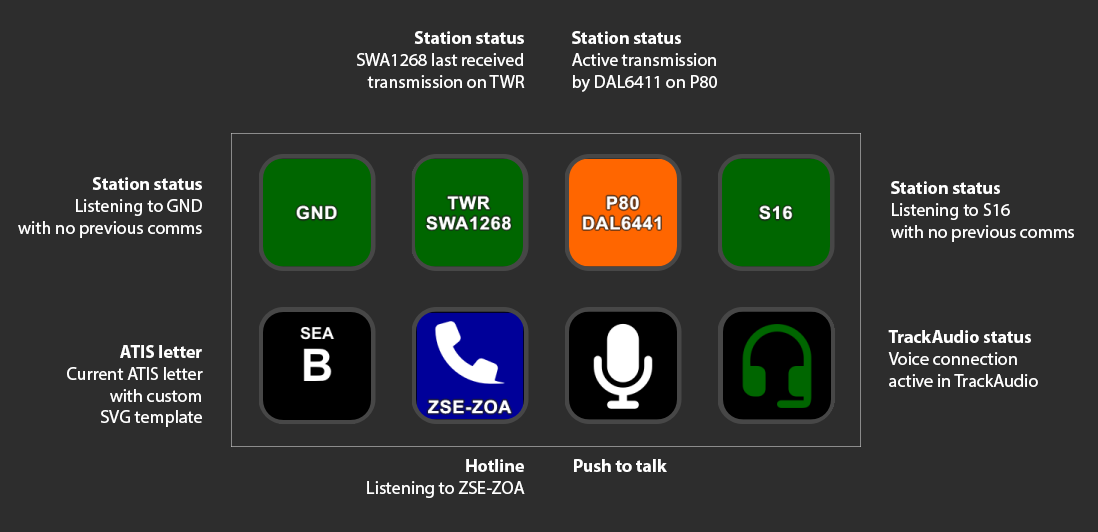
<style>
.page{position:relative;width:1098px;height:532px;background:#2d2d2d}
.page>*{position:absolute;margin:0}
.t1{font:18px "MyriadPro-Regular";color:#ffffff}
.t2{font:18px "MyriadPro-Bold";color:#ffffff}
</style>
<div class="page">
<p class="t1" style="left:357px;top:31px;width:168px;height:57px;text-align:right"><span class="t2">Station status<br></span>SWA1268 last received<br>transmission on TWR</p>
<p class="t1" style="left:572px;top:31px;width:145px;height:61px"><span class="t2">Station status<br></span>Active transmission<br>by DAL6411 on P80</p>
<p class="t1" style="left:18px;top:177px;width:184px;height:61px;text-align:right"><span class="t2">Station status<br></span>Listening to GND<br>with no previous comms</p>
<p class="t1" style="left:891px;top:181px;width:183px;height:61px"><span class="t2">Station status<br></span>Listening to S16<br>with no previous comms</p>
<p class="t1" style="left:888px;top:330px;width:150px;height:57px"><span class="t2">TrackAudio status<br></span>Voice connection<br>active in TrackAudio</p>
<p class="t1" style="left:67px;top:345px;width:136px;height:82px;text-align:right"><span class="t2">ATIS letter<br></span>Current ATIS letter<br>with custom<br>SVG template</p>
<p class="t1" style="left:367px;top:459px;width:158px;height:39px;text-align:right"><span class="t2">Hotline<br></span>Listening to ZSE-ZOA</p>
<p class="t2" style="left:574px;top:459px;width:93px;height:13px">Push to talk</p>
</div>
